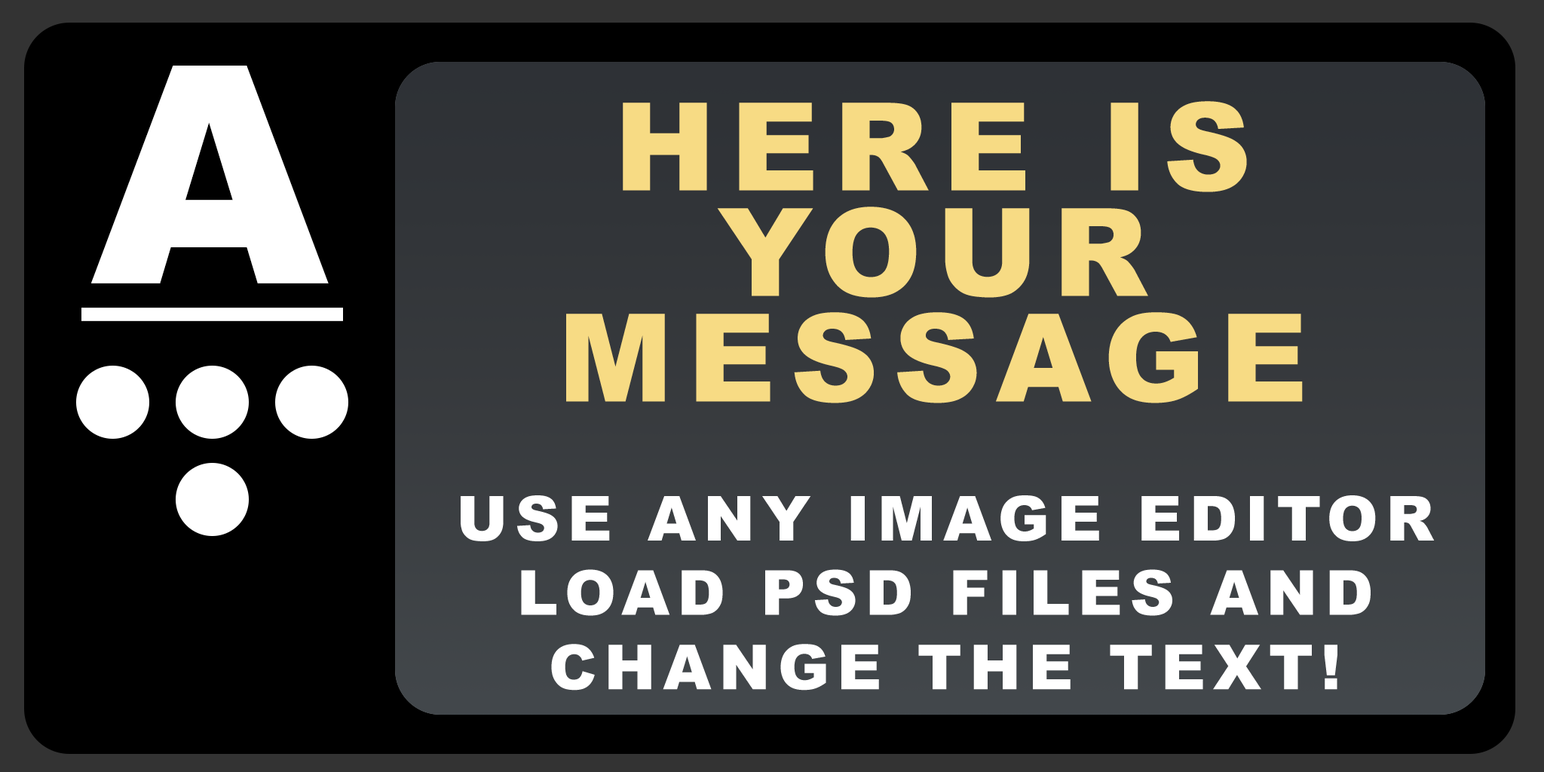
<style>
.page{position:relative;width:1544px;height:772px;background:#000000}
.page>*{position:absolute;margin:0}
.t1{font:303.9px "Arial-Black";letter-spacing:0.12em;color:#ffffff}
.t2{font:122.1px/105.5px "Arial-Black";letter-spacing:0.12em;color:#f7db84}
.t3{font:62px "Arial-Black";letter-spacing:0.12em;color:#ffffff}
</style>
<div class="page">
<p class="t1" style="left:91px;top:66px;width:238px;height:218px">A</p>
<p class="t2" style="left:566px;top:101px;width:737px;height:302px;text-align:center">HERE IS<br>YOUR<br>MESSAGE</p>
<p class="t3" style="left:461px;top:495px;width:974px;height:196px;text-align:center">USE ANY IMAGE EDITOR<br>LOAD PSD FILES AND<br>CHANGE THE TEXT!</p>
</div>
